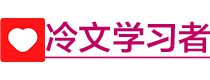
<style>
.page{position:relative;width:210px;height:80px;background:#ffffff}
.page>*{position:absolute;margin:0}
.t1{font:33.3px "FZLTZHK--GBK1-0";color:#c2005f;text-decoration:underline}
</style>
<div class="page">
<p class="t1" style="left:44px;top:21px;width:168px;height:38px">冷文学习者</p>
</div>
